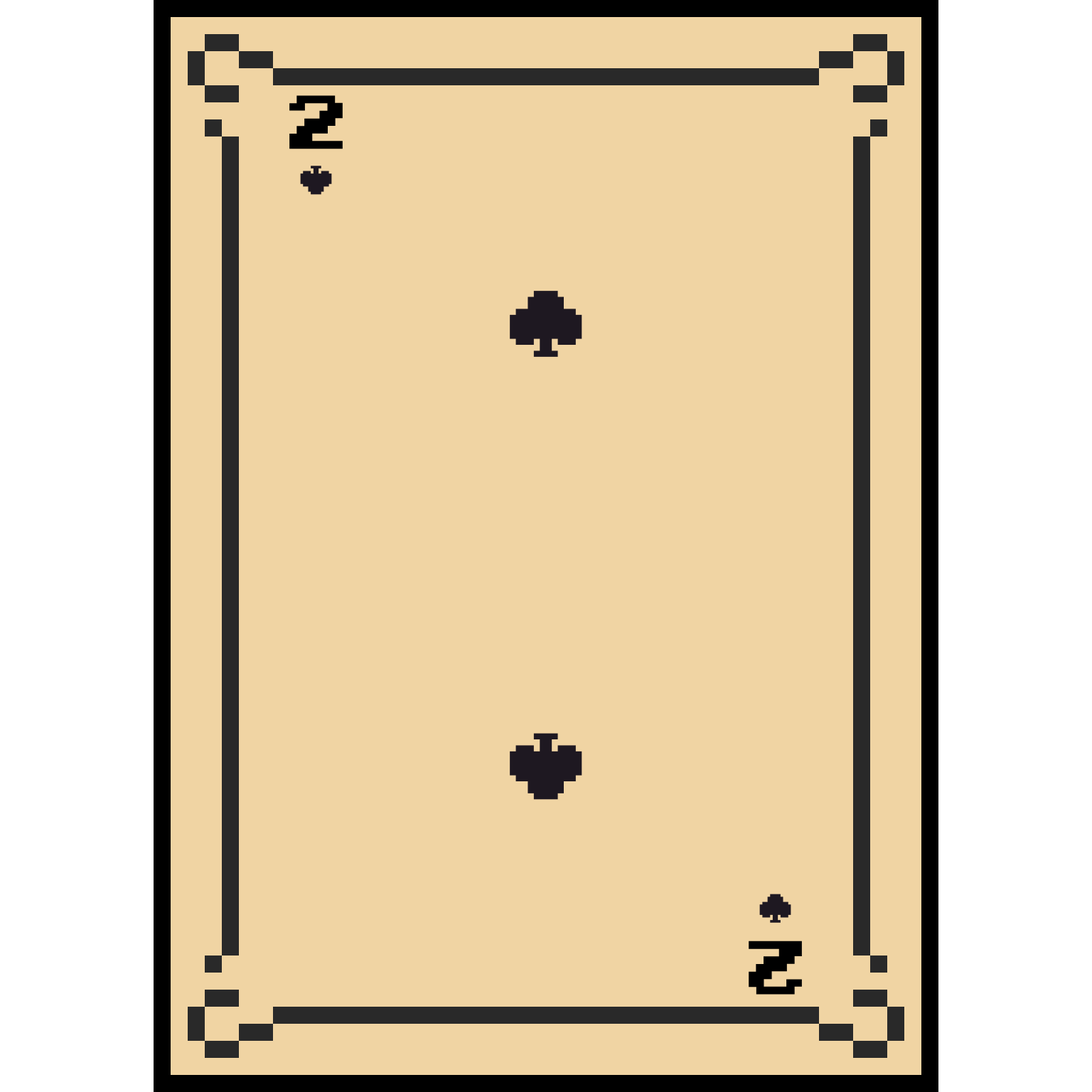
<style>
.page{position:relative;width:1092px;height:1092px;background:#f0d4a3}
.page>*{position:absolute;margin:0}
.t1{font:106.6px "ArcadeClassic";color:#000000}
</style>
<div class="page">
<p class="t1" style="left:289px;top:95px;width:54px;height:54px">2</p>
<p class="t1" style="left:749px;top:941px;width:53px;height:54px;rotate:180deg">2</p>
</div>
